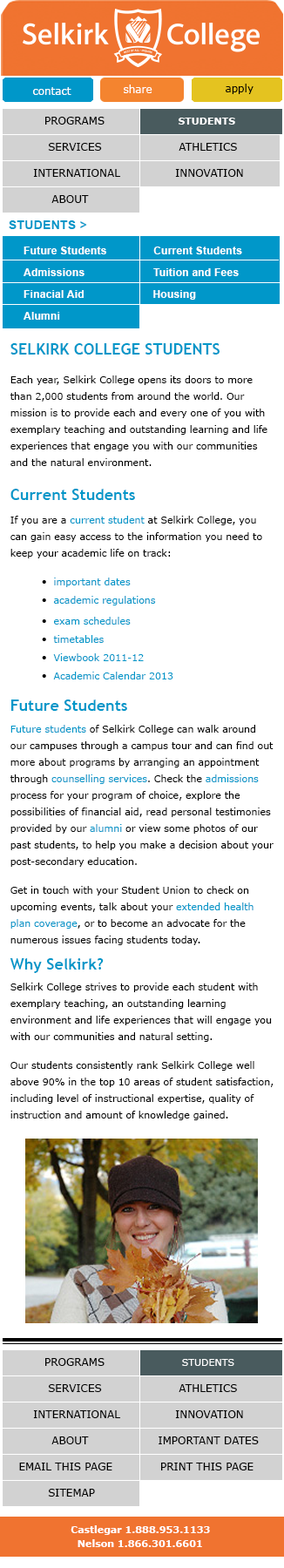
<style>
.page{position:relative;width:284px;height:1568px;background:#ffffff}
.page>*{position:absolute;margin:0}
.t1{font:10.5px "Verdana";color:#ffffff}
.t2{font:10.5px "Verdana";color:#000000}
.t3{font:10.5px/13.9px "Verdana";color:#000000;text-transform:uppercase}
.t4{font:9.6px/13.9px "Verdana-Bold";color:#ffffff;text-transform:uppercase}
.t5{font:12.2px "Arial-BoldMT";letter-spacing:0.02em;color:#0097c9}
.t6{font:10.5px/21.8px "Arial-BoldMT";letter-spacing:0.02em;color:#ffffff}
.t7{font:9.6px/16.6px "Verdana";color:#000000}
.t8{font:15.7px/3.5px "TrebuchetMS-Bold";color:#0097c9}
.t9{font:9.6px/16.6px "Verdana";color:#0097c9}
.t10{font:9.6px/13.9px "Verdana";color:#ffffff;text-transform:uppercase}
.t11{font:9.6px/13.9px "Verdana-Bold";color:#ffffff}
</style>
<div class="page">
<p class="t1" style="left:33px;top:87px;width:38px;height:8px">contact</p>
<p class="t1" style="left:124px;top:84px;width:28px;height:9px">share</p>
<p class="t2" style="left:226px;top:84px;width:27px;height:10px">apply</p>
<p class="t3" style="left:33px;top:117px;width:210px;height:86px">programs                    <span class="t4">students<br></span>        services                     athletics<br>    international               innovation<br>         about</p>
<p class="t5" style="left:9px;top:220px;width:78px;height:9px">STUDENTS &gt;</p>
<p class="t6" style="left:24px;top:247px;width:218px;height:73px">Future Students               Current Students<br>Admissions                      Tuition and Fees<br>Finacial Aid                      Housing<br>Alumni</p>
<p class="t7" style="left:10px;top:343px;width:264px;height:777px"><span class="t8">SELKIRK COLLEGE STUDENTS<br></span>Each year, Selkirk College opens its doors to more than 2,000 students from around the world. Our mission is to provide each and every one of you with exemplary teaching and outstanding learning and life experiences that engage you with our communities and the natural environment.<br><br><span class="t8">Current Students<br><br></span>If you are a <span class="t9">current student</span> at Selkirk College, you can gain easy access to the information you need to keep your academic life on track:<br> •<span class="t9">  important dates<br> </span>•<span class="t9">  academic regulations<br> </span>•<span class="t9">  exam schedules<br> </span>•<span class="t9">  timetables<br> </span>•<span class="t9">  Viewbook 2011-12  <br> </span>•<span class="t9">  Academic Calendar 2013<br><br></span><span class="t8">Future Students<br><br></span><span class="t9">Future students </span>of Selkirk College can walk around our campuses through a campus tour and can find out more about programs by arranging an appointment through <span class="t9">counselling services</span>. Check the <span class="t9">admissions </span>process for your program of choice, explore the possibilities of financial aid, read personal testimonies provided by our <span class="t9">alumni </span>or view some photos of our past students, to help you make a decision about your post-secondary education.<br>Get in touch with your Student Union to check on upcoming events, talk about your <span class="t9">extended health plan coverage</span>, or to become an advocate for the numerous issues facing students today.<br><br><br><br><span class="t8">Why Selkirk?<br></span>Selkirk College strives to provide each student with exemplary teaching, an outstanding learning environment and life experiences that will engage you with our communities and natural setting.<br>Our students consistently rank Selkirk College well above 90% in the top 10 areas of student satisfaction, including level of instructional expertise, quality of instruction and amount of knowledge gained.</p>
<p class="t3" style="left:19px;top:1358px;width:240px;height:139px">programs                     <span class="t10">students<br></span>        services                     athletics<br>    international               innovation<br>         about                   IMPORTANT DATES<br>EMAIL THIS PAGE             PRINT THIS PAGE<br>        SITEMAP</p>
<p class="t11" style="left:71px;top:1525px;width:139px;height:22px">Castlegar 1.888.953.1133<br>  Nelson 1.866.301.6601</p>
</div>
